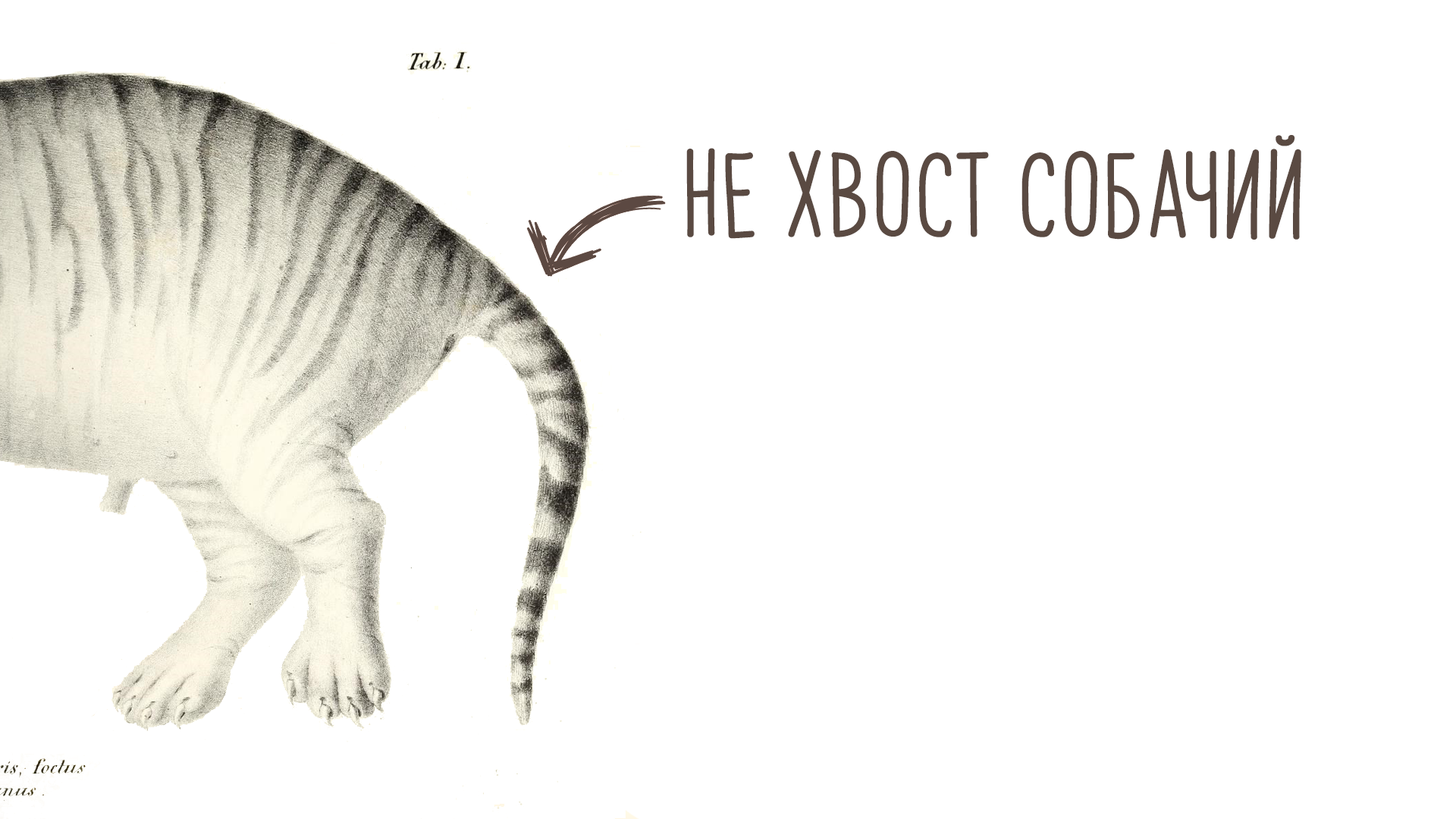
<style>
.page{position:relative;width:1456px;height:819px;background:#ffffff}
.page>*{position:absolute;margin:0}
.t1{font:72.8px "PapayaSunrise";color:#5a4a42;font-weight:bold}
</style>
<div class="page">
<p class="t1" style="left:686px;top:135px;width:615px;height:105px">не хвост собачий</p>
</div>
